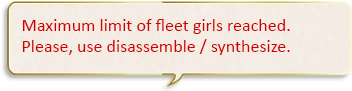
<style>
.page{position:relative;width:352px;height:91px}
.page>*{position:absolute;margin:0}
.t1{font:18px "Calibri";color:#d00000}
</style>
<div class="page">
<p class="t1" style="left:22px;top:19px;width:268px;height:36px">Maximum limit of fleet girls reached.<br>Please, use disassemble / synthesize.</p>
</div>
